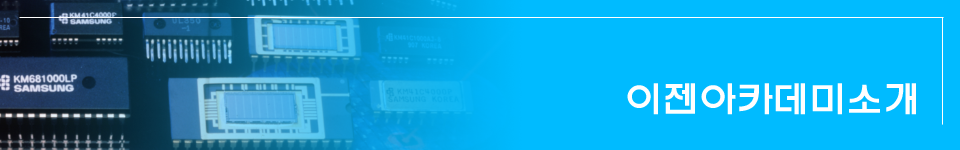
<style>
.page{position:relative;width:960px;height:150px;background:#00bbff}
.page>*{position:absolute;margin:0}
.t1{font:36px "Yj-TEUNTEUN--Bold";color:#fffefe}
</style>
<div class="page">
<p class="t1" style="left:627px;top:83px;width:289px;height:32px">이젠아카데미소개</p>
</div>
